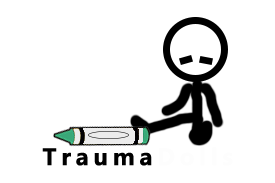
<style>
.page{position:relative;width:275px;height:183px;background:#ffffff}
.page>*{position:absolute;margin:0}
.t1{font:24px "Gadugi-Bold";letter-spacing:0.2em;color:#000000}
.t2{font:24px "Gadugi-Bold";letter-spacing:0.2em;color:#fdfdfd}
</style>
<div class="page">
<p class="t1" style="left:42px;top:147px;width:191px;height:19px">Trauma<span class="t2">Dolls</span></p>
</div>
